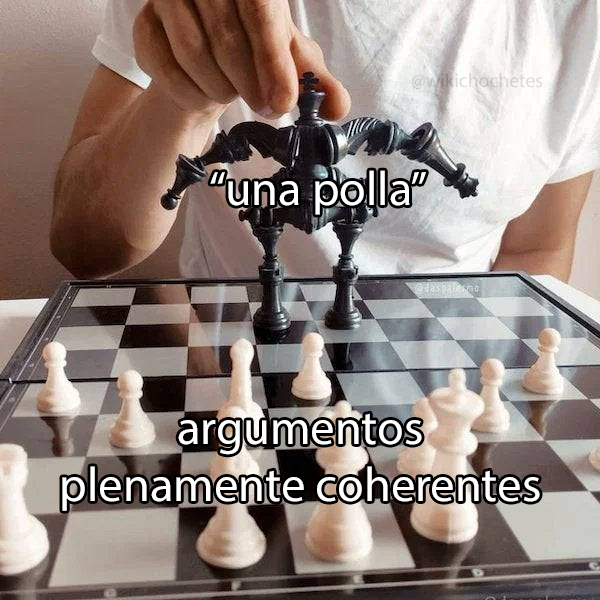
<style>
.page{position:relative;width:600px;height:600px}
.page>*{position:absolute;margin:0}
.t1{font:19.7px "MyriadPro-Regular";color:#d2d0cd}
.t2{font:48.4px "MyriadPro-Regular";color:#ffffff}
.t3{font:48.7px "MyriadPro-Regular";color:#ffffff}
</style>
<div class="page">
<p class="t1" style="left:412px;top:73px;width:131px;height:16px">@wikichochetes</p>
<p class="t2" style="left:210px;top:170px;width:216px;height:45px">“una polla”</p>
<p class="t3" style="left:62px;top:413px;width:478px;height:98px;text-align:center">argumentos<br>plenamente coherentes</p>
</div>
